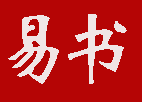
<style>
.page{position:relative;width:142px;height:102px;background:#b50505}
.page>*{position:absolute;margin:0}
.t1{font:85px "STXinwei";letter-spacing:-0.29em;color:#f0e5e5}
</style>
<div class="page">
<p class="t1" style="left:8px;top:14px;width:119px;height:70px">易书</p>
</div>
